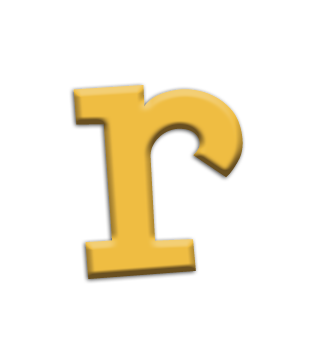
<style>
.page{position:relative;width:320px;height:352px;background:#ffffff}
.page>*{position:absolute;margin:0}
.t1{font:422px "FinkHeavy";color:#efbd42}
</style>
<div class="page">
<p class="t1" style="left:73px;top:85px;width:170px;height:194px;rotate:-4deg">r</p>
</div>
